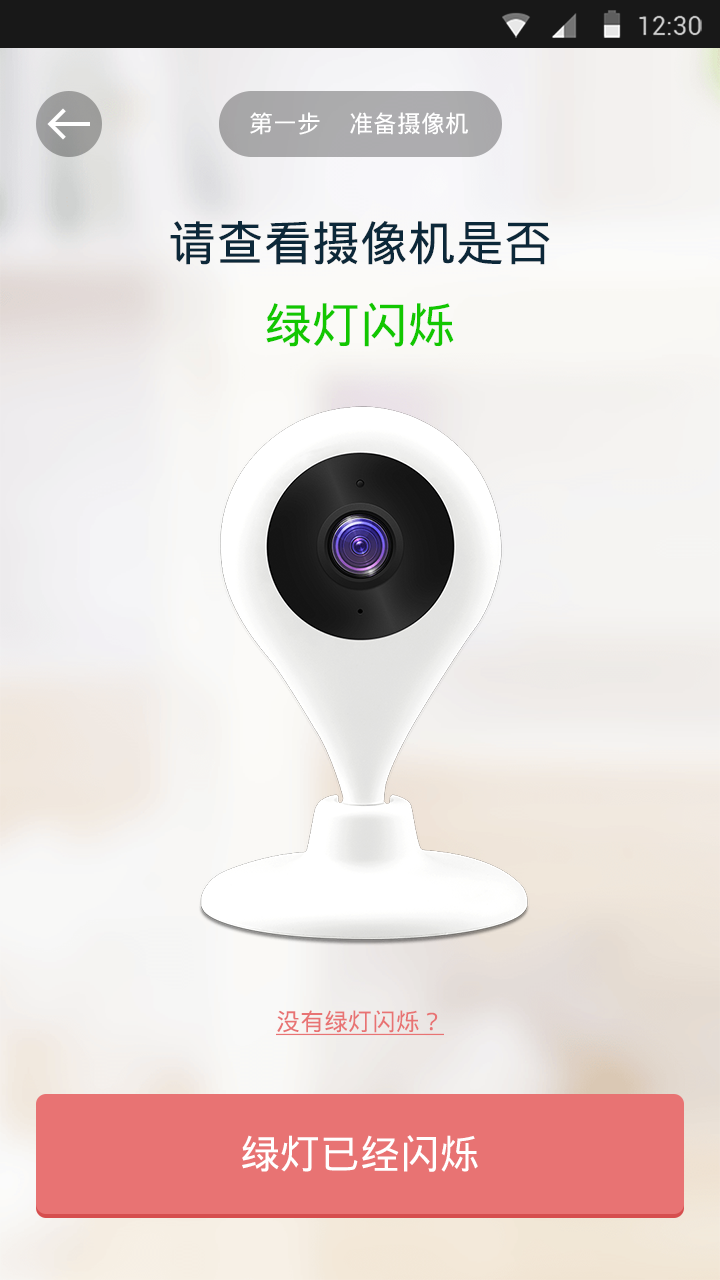
<style>
.page{position:relative;width:720px;height:1280px}
.page>*{position:absolute;margin:0}
.t1{font:24px "DroidSansFallback";color:#ffffff}
.t2{font:48px "DroidSansFallback";color:#0c2839}
.t3{font:48px "DroidSansFallback";color:#12c700}
.t4{font:24px "DroidSansFallback";color:#e87373;text-decoration:underline}
.t5{font:40px "DroidSansFallback";color:#ffffff}
</style>
<div class="page">
<p class="t1" style="left:250px;top:112px;width:70px;height:23px">第一步</p>
<p class="t1" style="left:350px;top:112px;width:118px;height:23px">准备摄像机</p>
<p class="t2" style="left:170px;top:221px;width:380px;height:44px">请查看摄像机是否</p>
<p class="t3" style="left:266px;top:302px;width:188px;height:45px">绿灯闪烁</p>
<p class="t4" style="left:276px;top:1010px;width:168px;height:26px">没有绿灯闪烁？</p>
<p class="t5" style="left:242px;top:1135px;width:236px;height:37px">绿灯已经闪烁</p>
</div>
